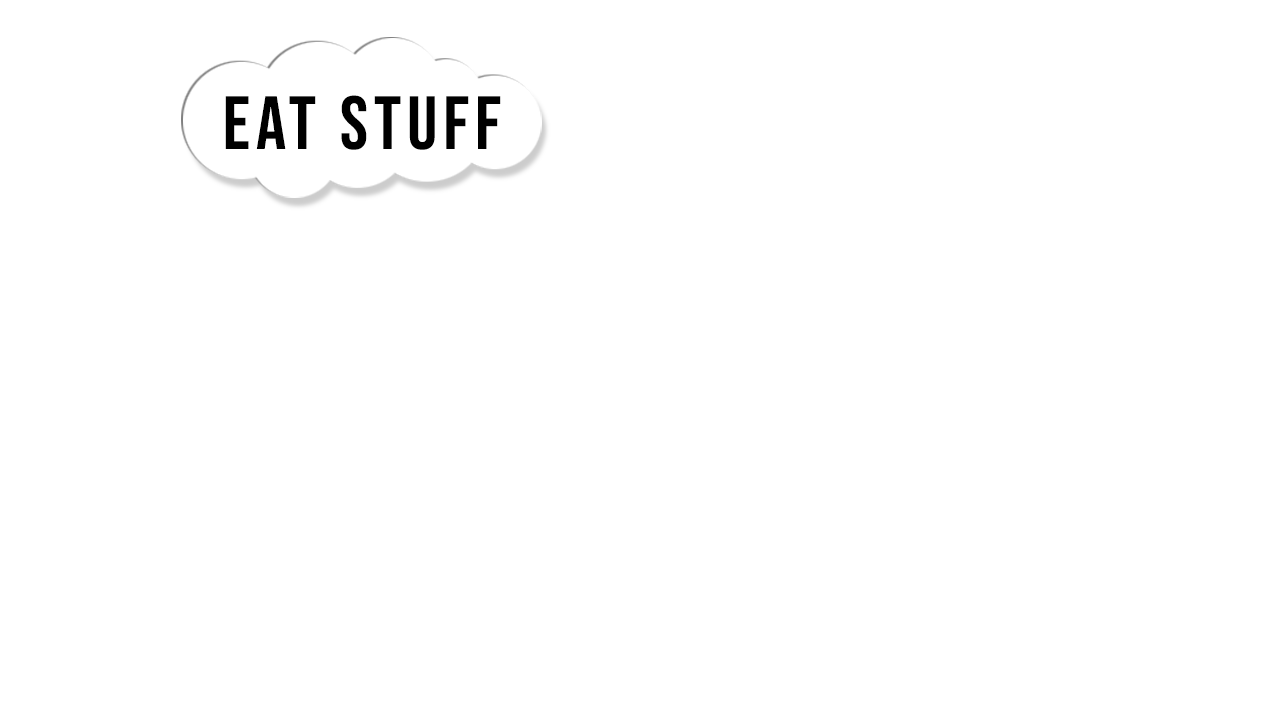
<style>
.page{position:relative;width:1280px;height:720px;background:#ffffff}
.page>*{position:absolute;margin:0}
.t1{font:75px "BebasNeue-Regular";letter-spacing:0.08em;color:#000000}
</style>
<div class="page">
<p class="t1" style="left:225px;top:95px;width:276px;height:55px">EAT STUFF</p>
</div>
